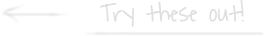
<style>
.page{position:relative;width:266px;height:36px;background:#ffffff}
.page>*{position:absolute;margin:0}
.t1{font:22px "WaitingfortheSunrise";color:#dfdfdf;font-weight:bold}
</style>
<div class="page">
<p class="t1" style="left:100px;top:0px;width:144px;height:27px">Try these out!</p>
</div>
